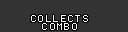
<style>
.page{position:relative;width:128px;height:32px;background:#333333}
.page>*{position:absolute;margin:0}
.t1{font:10px/8px "Terminal";color:#ffffff}
</style>
<div class="page">
<p class="t1" style="left:31px;top:15px;width:57px;height:15px;text-align:center">COLLECTS<br>COMBO</p>
</div>
